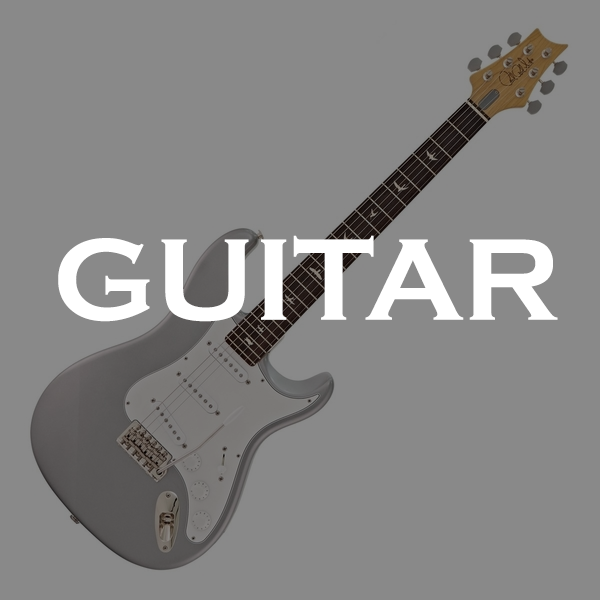
<style>
.page{position:relative;width:600px;height:600px;background:#898989}
.page>*{position:absolute;margin:0}
.t1{font:120px "CopperplateGothic-Bold";color:#ffffff}
</style>
<div class="page">
<p class="t1" style="left:58px;top:235px;width:500px;height:87px">GUITAR</p>
</div>
